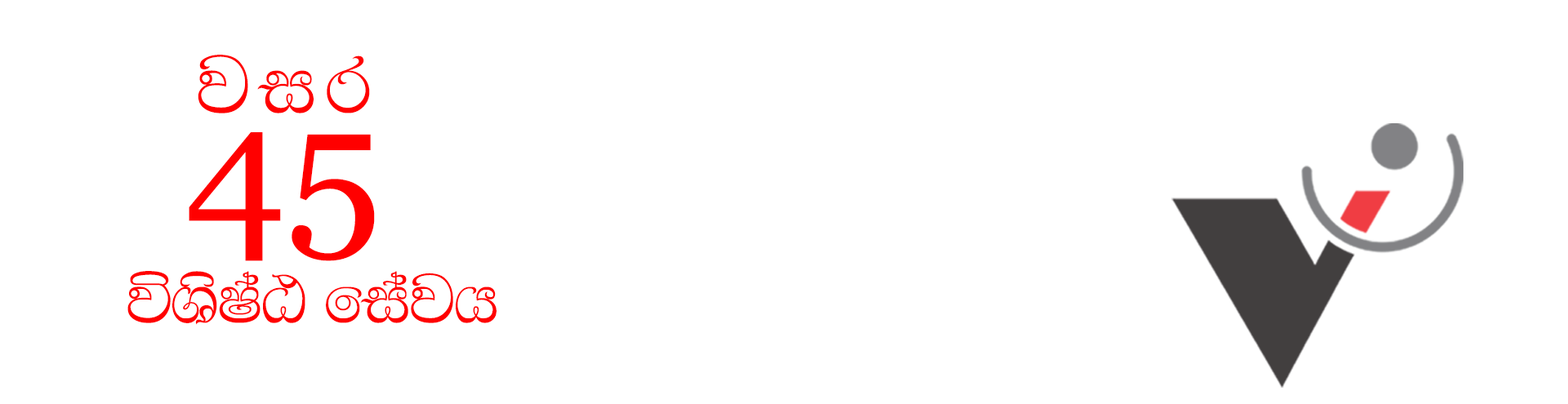
<style>
.page{position:relative;width:1568px;height:404px;background:#ffffff}
.page>*{position:absolute;margin:0}
.t1{font:105.9px "FMArjunnx";letter-spacing:0.1em;color:#ff0000}
.t2{font:179.6px "Vani";color:#ff0000}
.t3{font:89.8px "FMArjunnx";color:#ff0000}
</style>
<div class="page">
<p class="t1" style="left:198px;top:55px;width:172px;height:59px">jir</p>
<p class="t2" style="left:189px;top:132px;width:186px;height:129px">45</p>
<p class="t3" style="left:127px;top:271px;width:370px;height:54px">úYsIaG fiajh</p>
</div>
